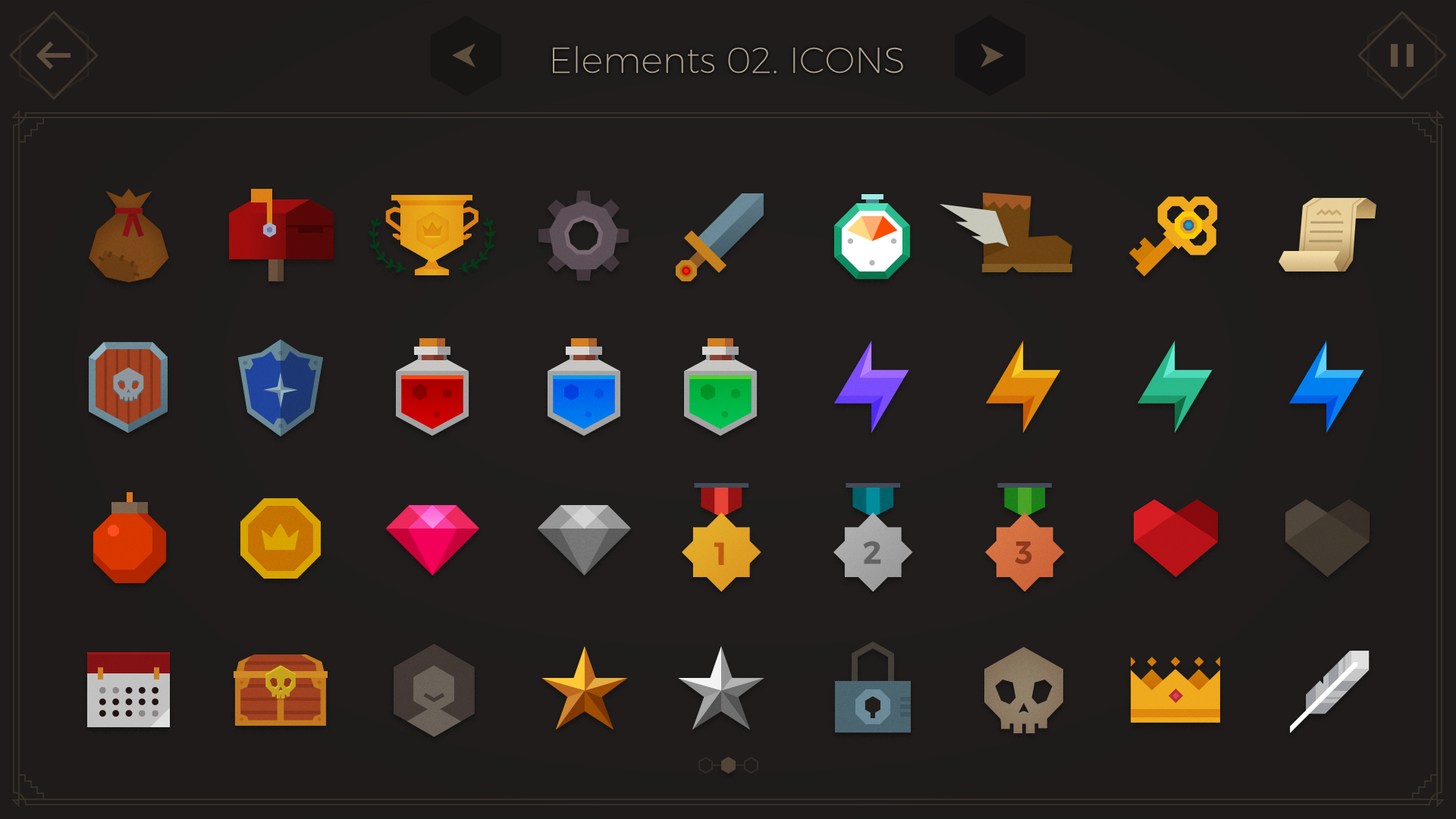
<style>
.page{position:relative;width:1456px;height:819px}
.page>*{position:absolute;margin:0}
.t1{font:36.4px "Montserrat-UltraLight";color:#aea190}
.t2{font:31.7px "Montserrat-SemiBold";color:#c56415;text-transform:uppercase}
.t3{font:31.7px "Montserrat-SemiBold";color:#6e6e6e;text-transform:uppercase}
.t4{font:31.7px "Montserrat-SemiBold";color:#9a4020;text-transform:uppercase}
</style>
<div class="page">
<p class="t1" style="left:553px;top:45px;width:350px;height:29px">Elements 02. ICONS</p>
<p class="t2" style="left:714px;top:542px;width:10px;height:23px">1</p>
<p class="t3" style="left:863px;top:541px;width:18px;height:23px">2</p>
<p class="t4" style="left:1015px;top:541px;width:17px;height:23px">3</p>
</div>
